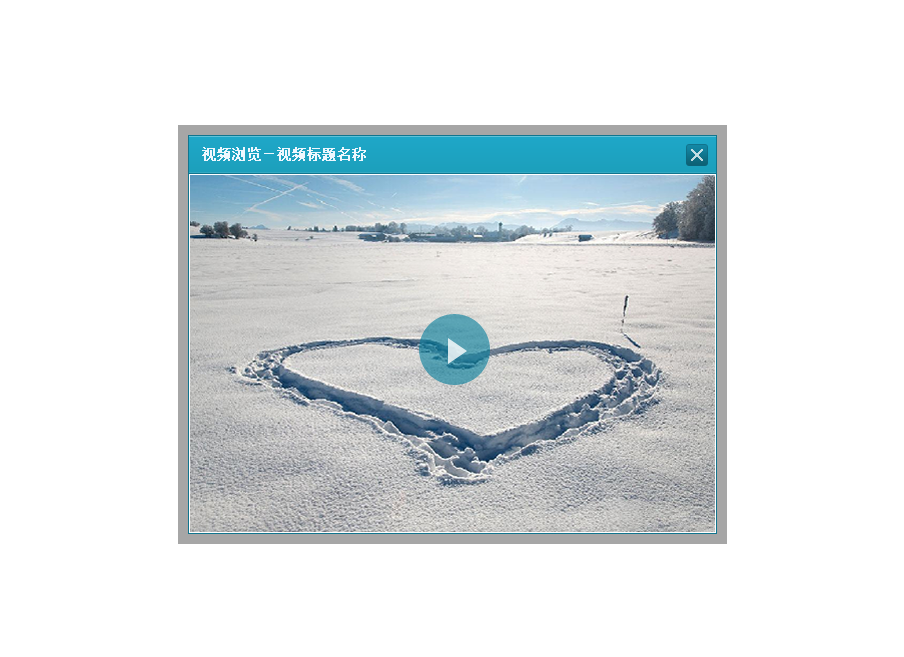
<style>
.page{position:relative;width:904px;height:657px;background:#ffffff}
.page>*{position:absolute;margin:0}
.t1{font:14px "SimSun";color:#eef7fe;font-weight:bold}
</style>
<div class="page">
<p class="t1" style="left:202px;top:147px;width:164px;height:14px">视频浏览－视频标题名称</p>
</div>
